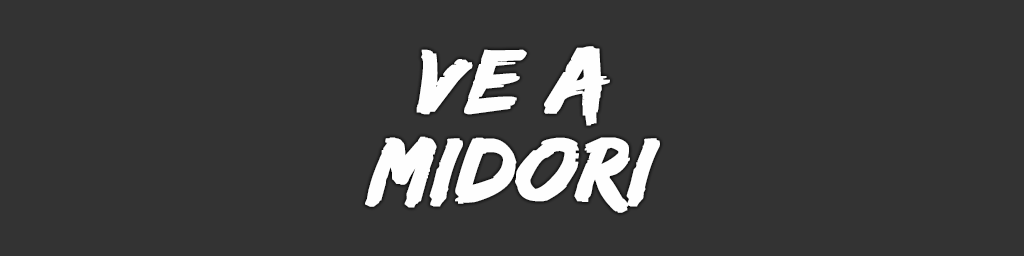
<style>
.page{position:relative;width:1024px;height:256px;background:#333333}
.page>*{position:absolute;margin:0}
.t1{font:94px/88px "EdoSZ";color:#fefefe;font-weight:bold;font-style:italic;scale:1.04 1}
</style>
<div class="page">
<p class="t1" style="left:365px;top:46px;width:295px;height:167px;text-align:center">ve a<br>midori</p>
</div>
